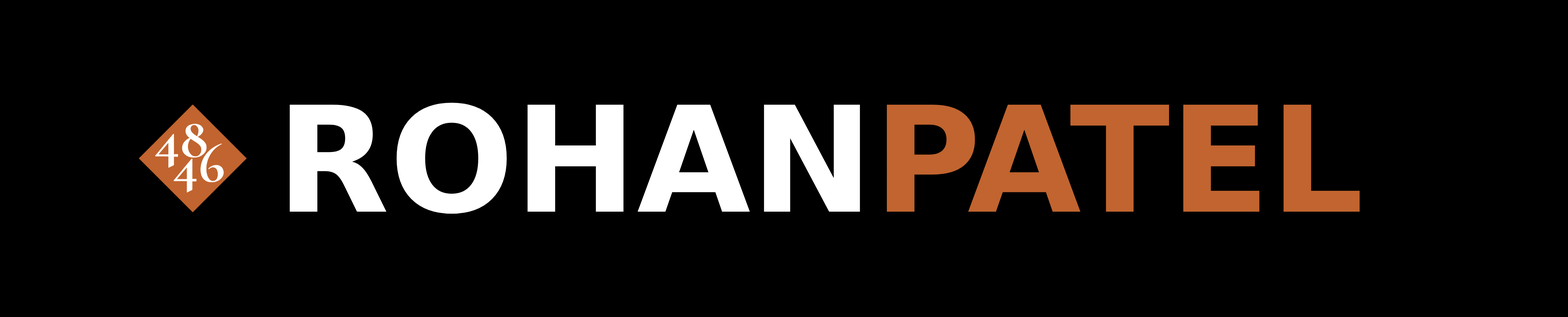
<style>
.page{position:relative;width:1568px;height:317px;background:#000000}
.page>*{position:absolute;margin:0}
.t1{font:146.8px "DejaVuSans-Bold";color:#ffffff}
.t2{font:146.8px "DejaVuSans-Bold";color:#c1642f}
</style>
<div class="page">
<p class="t1" style="left:290px;top:103px;width:1070px;height:111px">ROHAN<span class="t2">PATEL</span></p>
</div>
